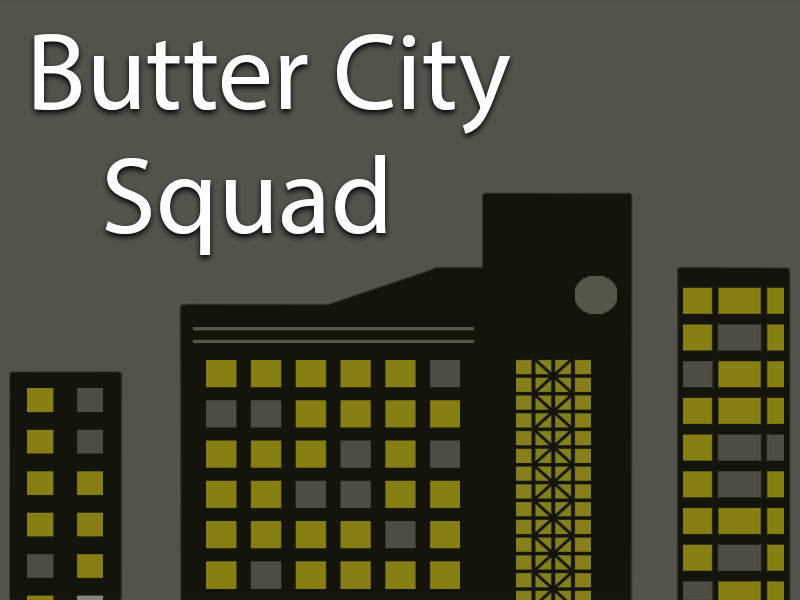
<style>
.page{position:relative;width:800px;height:600px;background:#53524b}
.page>*{position:absolute;margin:0}
.t1{font:110px "MyriadPro-Regular";color:#fefefe}
.t2{font:110px "MyriadPro-Regular";color:#ffffff}
</style>
<div class="page">
<p class="t1" style="left:34px;top:34px;width:476px;height:100px">Butter City</p>
<p class="t2" style="left:105px;top:155px;width:281px;height:100px">Squad</p>
</div>
